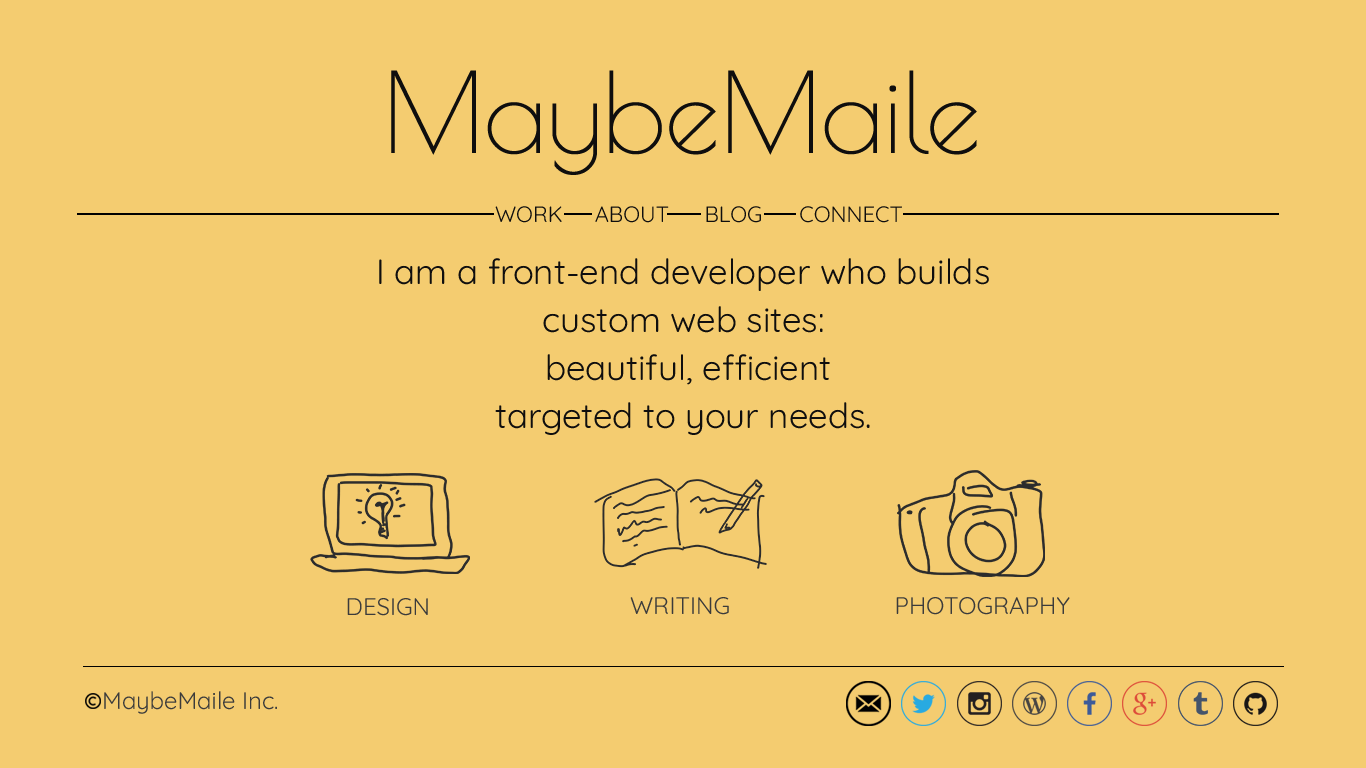
<style>
.page{position:relative;width:1366px;height:768px;background:#f4cc70}
.page>*{position:absolute;margin:0}
.t1{font:110px "PoiretOne-Regular";color:#0f0e0e}
.t2{font:22px "Quicksand-Regular";color:#0f0e0e}
.t3{font:35px/48px "Quicksand-Regular";color:#0f0e0e}
.t4{font:24px "Quicksand-Regular";color:#3b3b3b}
</style>
<div class="page">
<p class="t1" style="left:391px;top:70px;width:586px;height:105px">MaybeMaile</p>
<p class="t2" style="left:495px;top:206px;width:67px;height:17px">WORK</p>
<p class="t2" style="left:595px;top:206px;width:74px;height:17px">ABOUT</p>
<p class="t2" style="left:706px;top:206px;width:55px;height:17px">BLOG</p>
<p class="t2" style="left:800px;top:206px;width:102px;height:17px">CONNECT</p>
<p class="t3" style="left:379px;top:258px;width:610px;height:177px;text-align:center">I am a front-end developer who builds <br>custom web sites:<br> beautiful, efficient <br>targeted to your needs.</p>
<p class="t4" style="left:347px;top:598px;width:81px;height:18px">DESIGN</p>
<p class="t4" style="left:630px;top:597px;width:99px;height:18px">WRITING</p>
<p class="t4" style="left:896px;top:597px;width:174px;height:18px">PHOTOGRAPHY</p>
<p class="t4" style="left:104px;top:691px;width:173px;height:23px">MaybeMaile Inc.</p>
</div>
